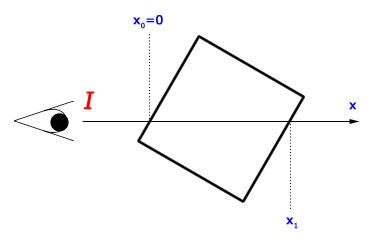
<style>
.page{position:relative;width:374px;height:245px;background:#ffffff}
.page>*{position:absolute;margin:0}
.t1{font:12px "Verdana";color:#0000ff;font-weight:bold}
.t2{font:24px "Verdana";color:#ff0000;font-weight:bold;font-style:italic}
</style>
<div class="page">
<p class="t1" style="left:133px;top:15px;width:30px;height:14px">x0=0</p>
<p class="t2" style="left:83px;top:91px;width:12px;height:19px">I</p>
<p class="t1" style="left:349px;top:102px;width:8px;height:8px">x</p>
<p class="t1" style="left:286px;top:217px;width:12px;height:12px">x1</p>
</div>
